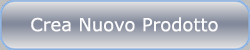
<style>
.page{position:relative;width:250px;height:50px}
.page>*{position:absolute;margin:0}
.t1{font:18px "Verdana";color:#fcfbfb}
.t2{font:14px "BrushScriptMT";color:#595959}
</style>
<div class="page">
<p class="t1" style="left:31px;top:17px;width:187px;height:15px"><span class="t2"><br></span>Crea Nuovo Prodotto</p>
</div>
